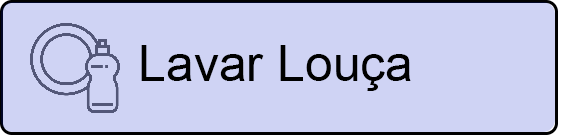
<style>
.page{position:relative;width:561px;height:138px;background:#cfd3f4}
.page>*{position:absolute;margin:0}
.t1{font:50px "ArialMT";color:#000000}
</style>
<div class="page">
<p class="t1" style="left:141px;top:45px;width:270px;height:46px">Lavar Louça</p>
</div>
